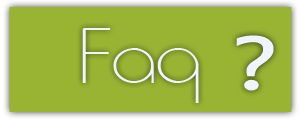
<style>
.page{position:relative;width:300px;height:120px;background:#99b433}
.page>*{position:absolute;margin:0}
.t1{font:90px "Metro-Normal";color:#eff4ff}
.t2{font:84.7px "EstrangeloEdessa";color:#eff4ff;scale:1.3 1}
</style>
<div class="page">
<p class="t1" style="left:82px;top:28px;width:117px;height:75px">Faq</p>
<p class="t2" style="left:236px;top:35px;width:38px;height:56px">?</p>
</div>
